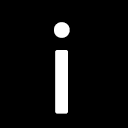
<style>
.page{position:relative;width:128px;height:128px;background:#000000}
.page>*{position:absolute;margin:0}
.t1{font:120.8px "YuGothicUI-Regular";color:#ffffff;font-weight:bold}
</style>
<div class="page">
<p class="t1" style="left:54px;top:22px;width:16px;height:92px">i</p>
</div>
